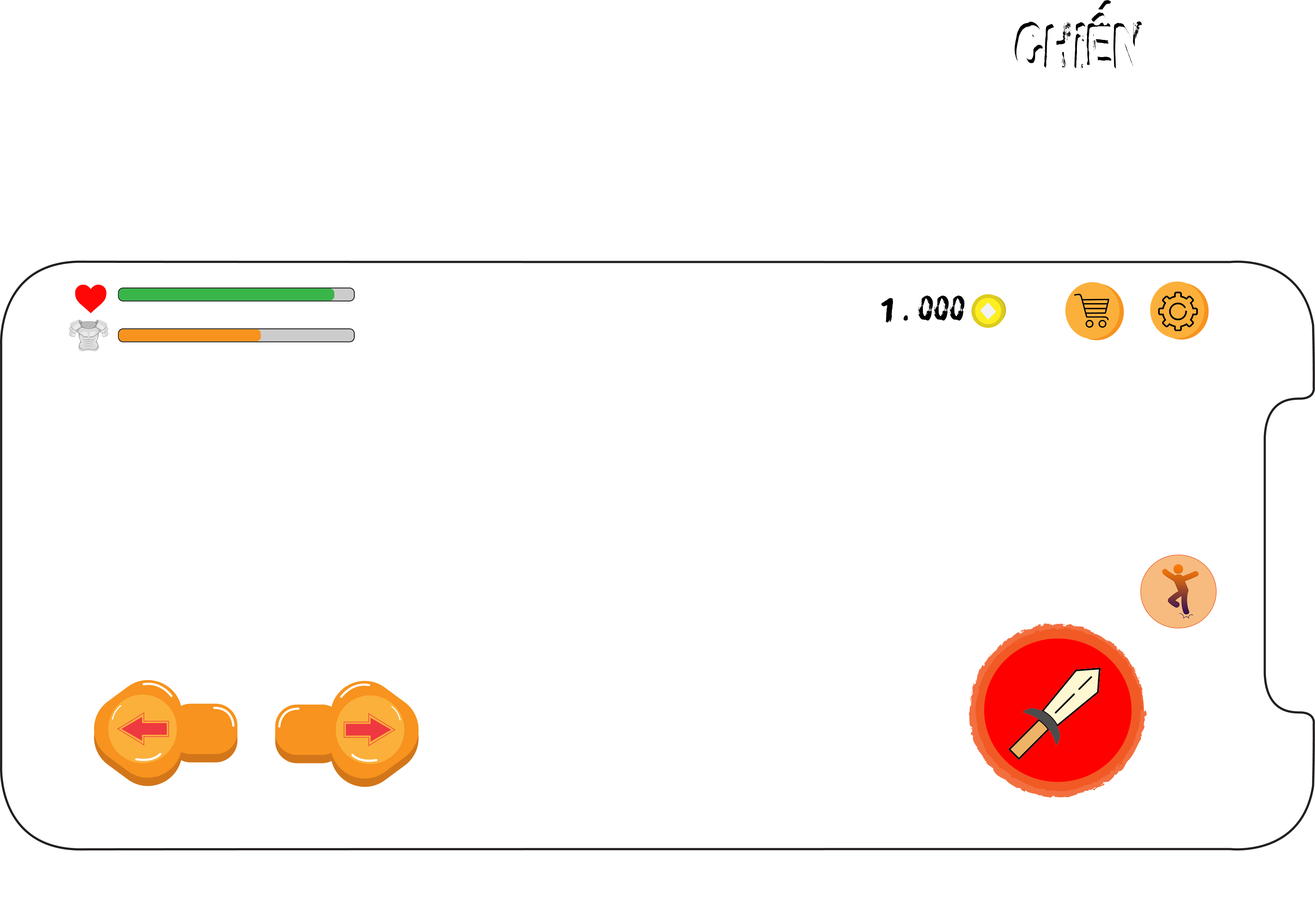
<style>
.page{position:relative;width:1315px;height:907px;background:#ffffff}
.page>*{position:absolute;margin:0}
.t1{font:59.8px "iCielBrushUp";color:#ffffff}
.t2{font:33.5px "iCielBrushUp";color:#000000}
</style>
<div class="page">
<p class="t1" style="left:1014px;top:0px;width:128px;height:70px">Chiến</p>
<p class="t2" style="left:881px;top:295px;width:83px;height:28px">1 . 000</p>
</div>
